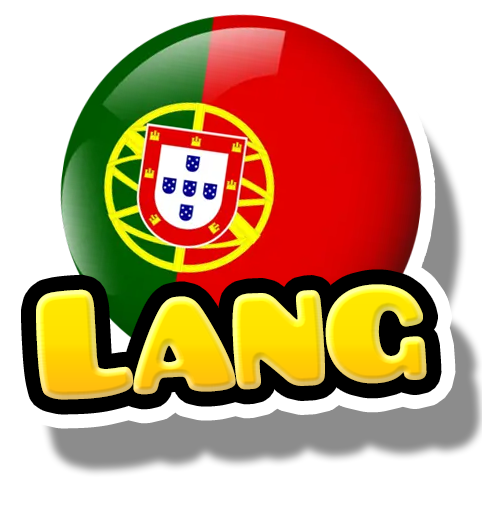
<style>
.page{position:relative;width:482px;height:512px;background:#ffffff}
.page>*{position:absolute;margin:0}
.t1{font:167.7px "Pusab";letter-spacing:-0.035em}
</style>
<div class="page">
<p class="t1" style="left:36px;top:284px;width:391px;height:116px;rotate:-3deg">Lang</p>
</div>
